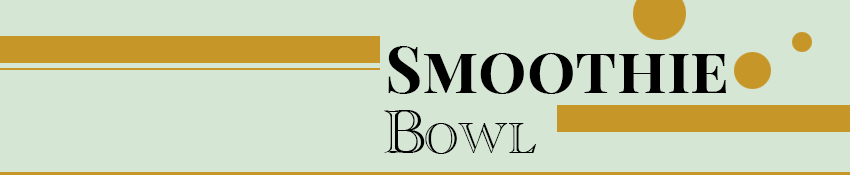
<style>
.page{position:relative;width:850px;height:175px;background:#d5e6d4}
.page>*{position:absolute;margin:0}
.t1{font:64px "PlayfairDisplay-Bold";color:#000000;font-variant:small-caps}
.t2{font:64px "AcademyEngravedLetPlain";color:#000000;font-variant:small-caps}
</style>
<div class="page">
<p class="t1" style="left:388px;top:46px;width:338px;height:48px">Smoothie</p>
<p class="t2" style="left:384px;top:110px;width:153px;height:44px">Bowl</p>
</div>
